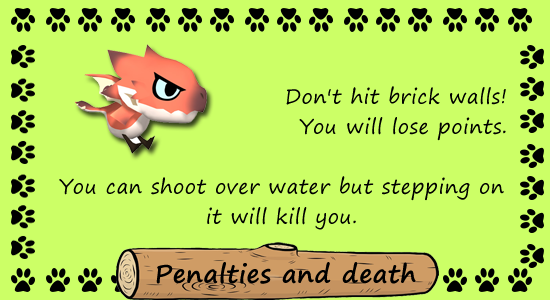
<style>
.page{position:relative;width:550px;height:300px;background:#ccff66}
.page>*{position:absolute;margin:0}
.t1{font:20px/30px "SegoePrint";letter-spacing:0.025em;color:#000000}
.t2{font:25px "SegoePrint-Bold";letter-spacing:0.025em;color:#000000}
</style>
<div class="page">
<p class="t1" style="left:59px;top:86px;width:447px;height:144px;text-align:right">Don't hit brick walls! <br>You will lose points.<br><br>You can shoot over water but stepping on it will kill you.</p>
<p class="t2" style="left:156px;top:262px;width:260px;height:22px">Penalties and death</p>
</div>
